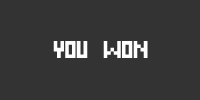
<style>
.page{position:relative;width:200px;height:100px;background:#333333}
.page>*{position:absolute;margin:0}
.t1{font:24px "PixelCyr-Normal";color:#ffffff}
</style>
<div class="page">
<p class="t1" style="left:53px;top:41px;width:95px;height:17px">YOU WON</p>
</div>
